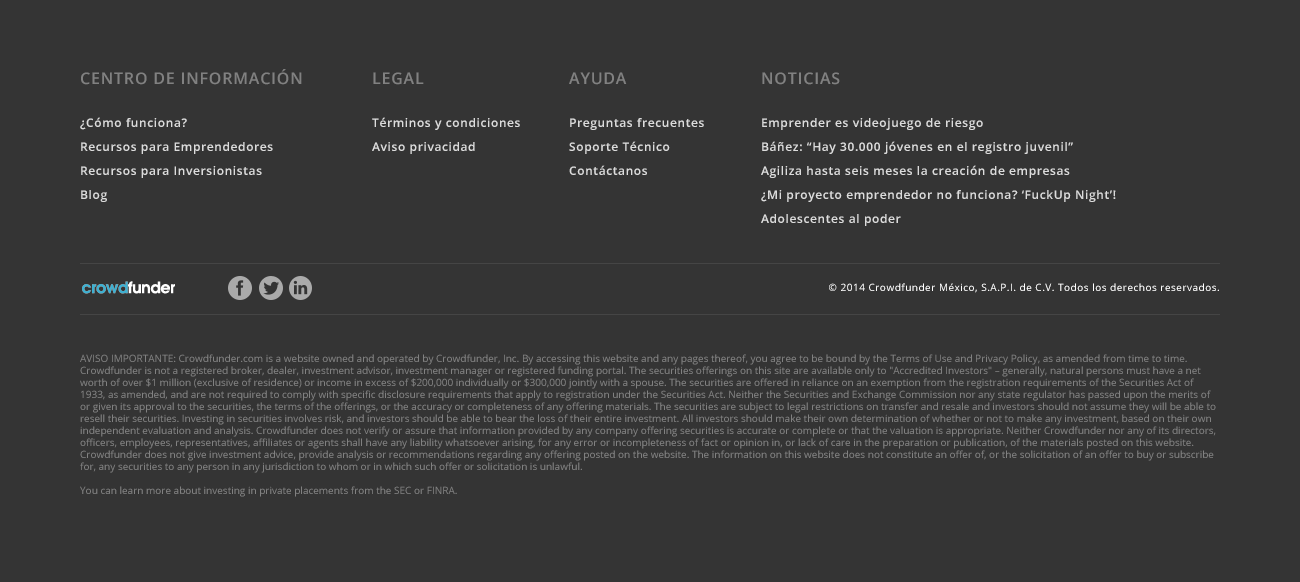
<style>
.page{position:relative;width:1300px;height:582px;background:#343434}
.page>*{position:absolute;margin:0}
.t1{font:12px/24px "OpenSans-Semibold";letter-spacing:0.05em;color:#dcdcdc}
.t2{font:16px "OpenSans-Semibold";letter-spacing:0.05em;color:#818181;text-transform:uppercase}
.t3{font:10px "OpenSans";letter-spacing:0.05em;color:#ffffff}
.t4{font:10px "OpenSans";color:#818181}
</style>
<div class="page">
<p class="t1" style="left:80px;top:69px;width:222px;height:133px"><span class="t2">centro de información<br><br></span>¿Cómo funciona?<br>Recursos para Emprendedores<br>Recursos para Inversionistas<br>Blog</p>
<p class="t1" style="left:372px;top:72px;width:148px;height:82px"><span class="t2">Legal<br><br></span>Términos y condiciones<br>Aviso privacidad</p>
<p class="t1" style="left:569px;top:72px;width:135px;height:103px"><span class="t2">Ayuda<br><br></span>Preguntas frecuentes<br>Soporte Técnico<br>Contáctanos</p>
<p class="t1" style="left:761px;top:72px;width:355px;height:154px"><span class="t2">Noticias<br><br></span>Emprender es videojuego de riesgo<br>Báñez: “Hay 30.000 jóvenes en el registro juvenil”<br>Agiliza hasta seis meses la creación de empresas<br>¿Mi proyecto emprendedor no funciona? ‘FuckUp Night’!<br>Adolescentes al poder</p>
<p class="t3" style="left:829px;top:283px;width:390px;height:10px">© 2014 Crowdfunder México, S.A.P.I. de C.V. Todos los derechos reservados.</p>
<p class="t4" style="left:80px;top:354px;width:1136px;height:143px">AVISO IMPORTANTE: Crowdfunder.com is a website owned and operated by Crowdfunder, Inc. By accessing this website and any pages thereof, you agree to be bound by the Terms of Use and Privacy Policy, as amended from time to time. Crowdfunder is not a registered broker, dealer, investment advisor, investment manager or registered funding portal. The securities offerings on this site are available only to "Accredited Investors" – generally, natural persons must have a net worth of over $1 million (exclusive of residence) or income in excess of $200,000 individually or $300,000 jointly with a spouse. The securities are offered in reliance on an exemption from the registration requirements of the Securities Act of 1933, as amended, and are not required to comply with specific disclosure requirements that apply to registration under the Securities Act. Neither the Securities and Exchange Commission nor any state regulator has passed upon the merits of or given its approval to the securities, the terms of the offerings, or the accuracy or completeness of any offering materials. The securities are subject to legal restrictions on transfer and resale and investors should not assume they will be able to resell their securities. Investing in securities involves risk, and investors should be able to bear the loss of their entire investment. All investors should make their own determination of whether or not to make any investment, based on their own independent evaluation and analysis. Crowdfunder does not verify or assure that information provided by any company offering securities is accurate or complete or that the valuation is appropriate. Neither Crowdfunder nor any of its directors, officers, employees, representatives, affiliates or agents shall have any liability whatsoever arising, for any error or incompleteness of fact or opinion in, or lack of care in the preparation or publication, of the materials posted on this website. Crowdfunder does not give investment advice, provide analysis or recommendations regarding any offering posted on the website. The information on this website does not constitute an offer of, or the solicitation of an offer to buy or subscribe for, any securities to any person in any jurisdiction to whom or in which such offer or solicitation is unlawful.<br><br>You can learn more about investing in private placements from the SEC or FINRA.</p>
</div>
